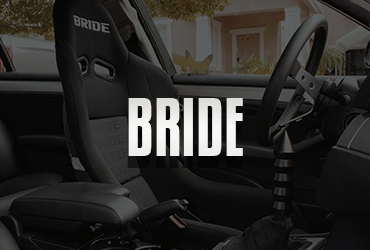
<style>
.page{position:relative;width:370px;height:250px}
.page>*{position:absolute;margin:0}
.t1{font:72.3px "KenyanCoffeeRg-Regular";color:#ffffff;font-weight:bold;scale:0.88 1}
</style>
<div class="page">
<p class="t1" style="left:128px;top:98px;width:115px;height:58px">BRIDE</p>
</div>
